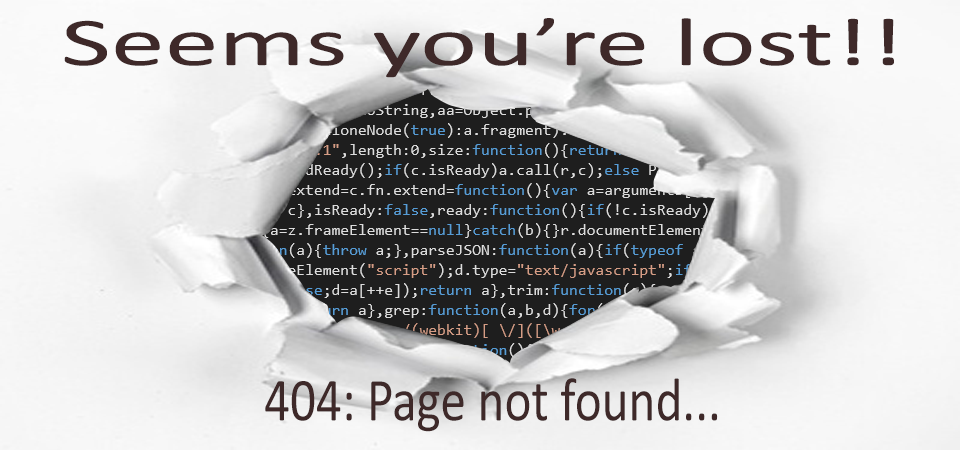
<style>
.page{position:relative;width:960px;height:450px}
.page>*{position:absolute;margin:0}
.t1{font:68.6px "Calibri";color:#3e2929;scale:1.58 1}
.t2{font:61.4px "Calibri";color:#3e2929;scale:0.83 1}
</style>
<div class="page">
<p class="t1" style="left:64px;top:18px;width:830px;height:60px">Seems you’re lost!!</p>
<p class="t2" style="left:265px;top:378px;width:453px;height:54px">404: Page not found...</p>
</div>
